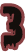
<style>
.page{position:relative;width:25px;height:55px;background:#130f0c}
.page>*{position:absolute;margin:0}
.t1{font:45.8px "CSNPWDTNFI";color:#130f0c}
</style>
<div class="page">
<p class="t1" style="left:3px;top:6px;width:20px;height:43px">3</p>
</div>
